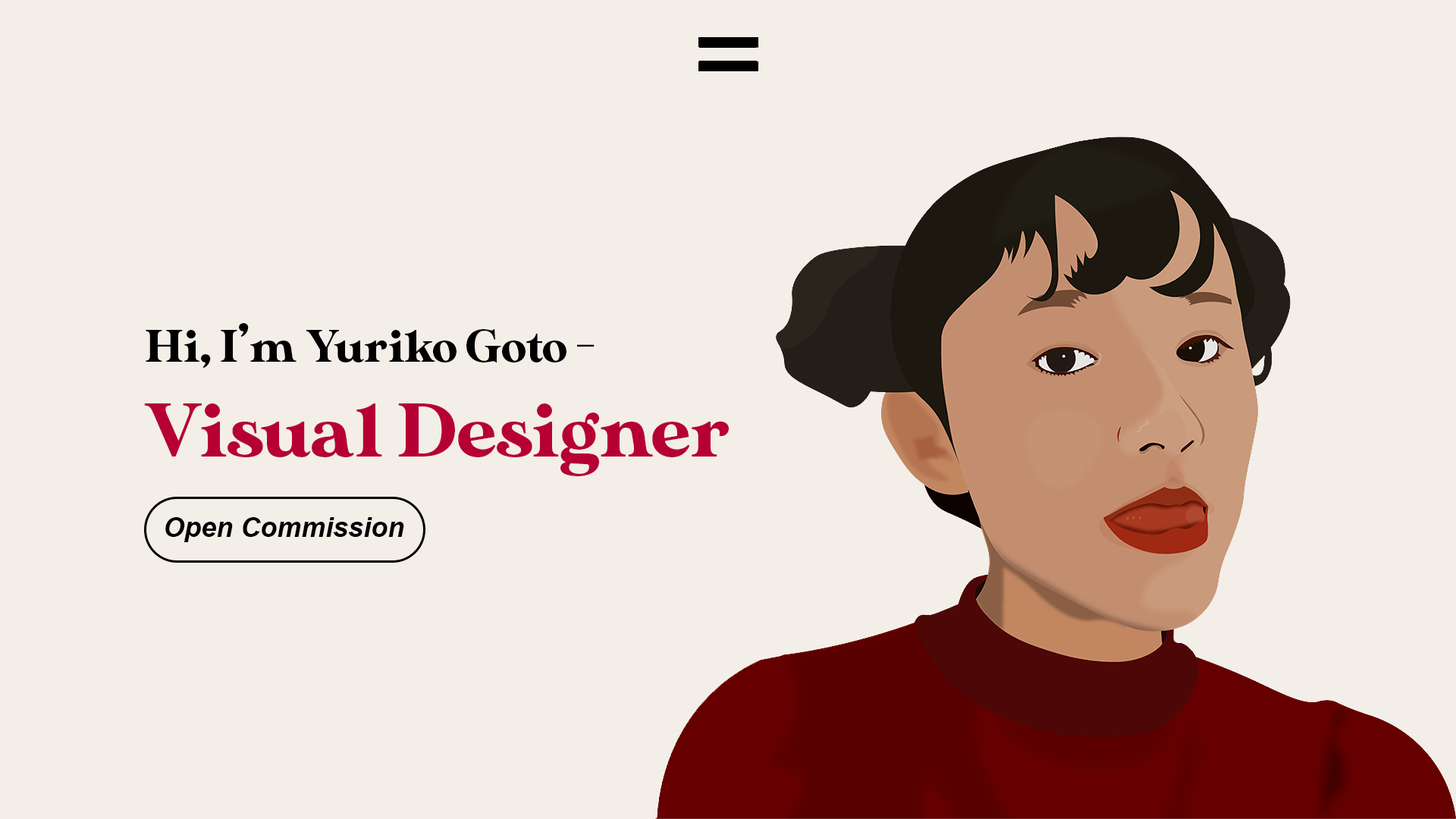
<style>
.page{position:relative;width:1456px;height:819px;background:#f3eee8}
.page>*{position:absolute;margin:0}
.t1{font:45.5px "MADESunflower";color:#000000}
.t2{font:75.8px "MADESunflower";color:#b60033}
.t3{font:27.3px "Arial-BoldItalicMT";color:#000000}
</style>
<div class="page">
<p class="t1" style="left:146px;top:323px;width:449px;height:46px">Hi, I’m Yuriko Goto -</p>
<p class="t2" style="left:144px;top:403px;width:585px;height:73px">Visual Designer</p>
<p class="t3" style="left:165px;top:517px;width:239px;height:25px">Open Commission</p>
</div>
